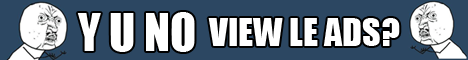
<style>
.page{position:relative;width:468px;height:60px;background:#2c4762}
.page>*{position:absolute;margin:0}
.t1{font:48px "Impact";color:#ffffff}
.t2{font:36px "Impact";color:#ffffff}
</style>
<div class="page">
<p class="t1" style="left:77px;top:12px;width:118px;height:40px">Y U NO</p>
<p class="t2" style="left:208px;top:18px;width:192px;height:28px">VIEW LE ADS?</p>
</div>
